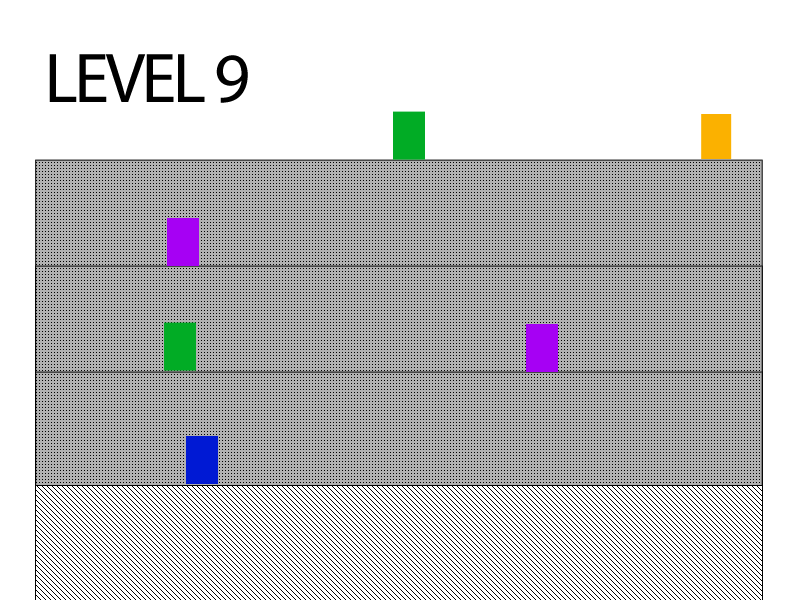
<style>
.page{position:relative;width:800px;height:600px;background:#ffffff}
.page>*{position:absolute;margin:0}
.t1{font:70.7px "MyriadPro-Regular";letter-spacing:-0.05em;color:#000000}
</style>
<div class="page">
<p class="t1" style="left:49px;top:54px;width:199px;height:49px">LEVEL 9</p>
</div>
